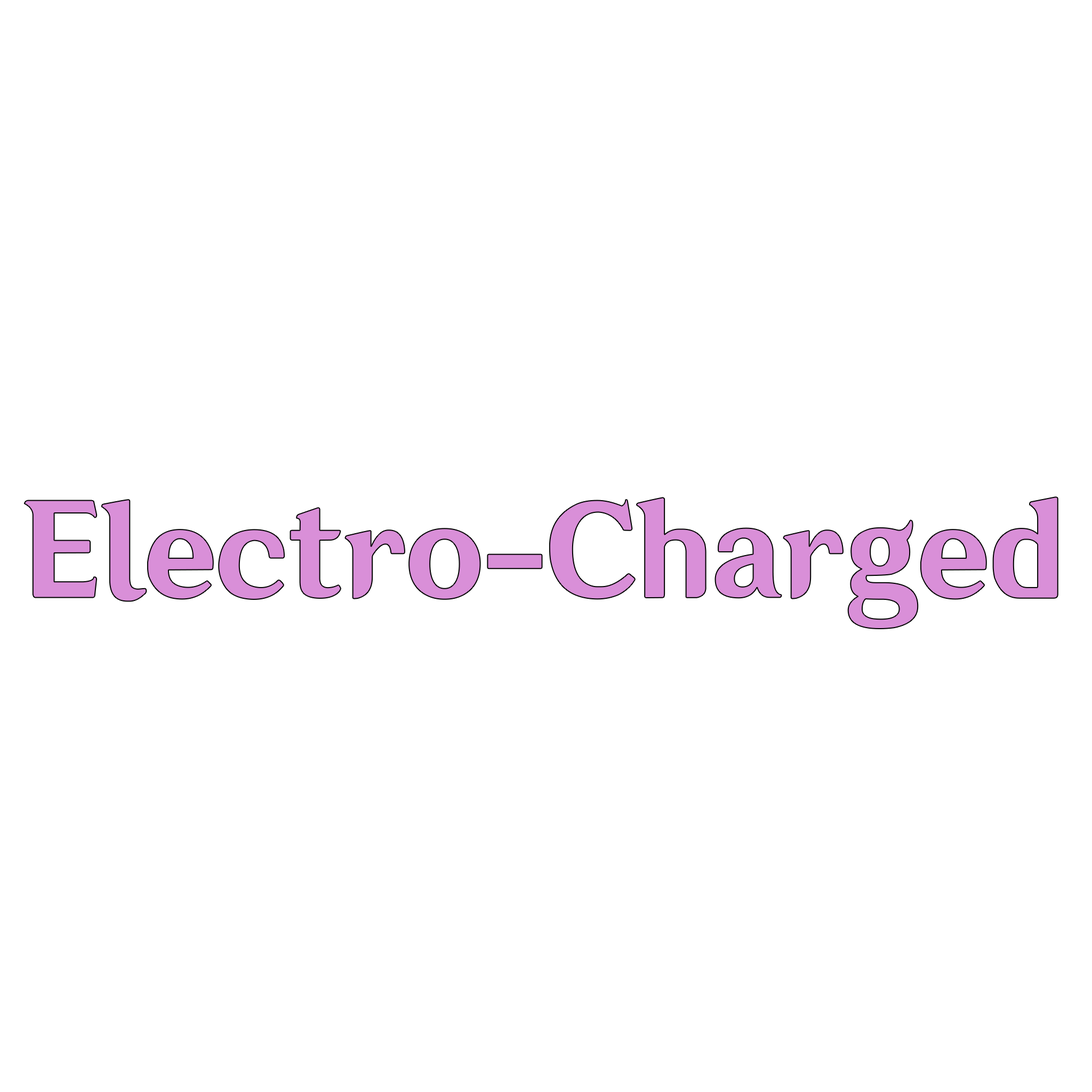
<style>
.page{position:relative;width:1092px;height:1092px;background:#ffffff}
.page>*{position:absolute;margin:0}
.t1{font:122.2px "Default_SC-85W";color:#d98fd8}
</style>
<div class="page">
<p class="t1" style="left:24px;top:497px;width:1034px;height:132px">Electro-Charged</p>
</div>
